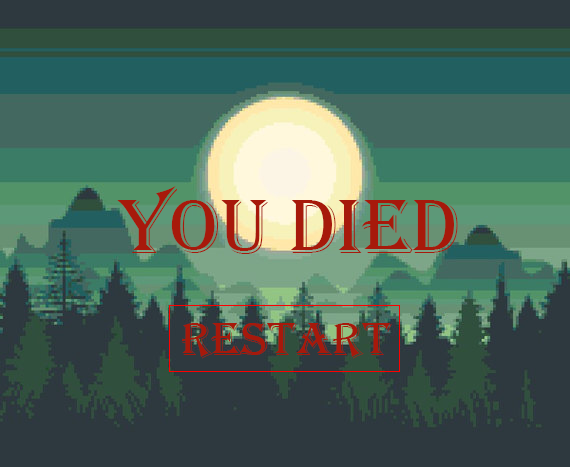
<style>
.page{position:relative;width:570px;height:467px;background:#2e393f}
.page>*{position:absolute;margin:0}
.t1{font:80px "Algerian";color:#a7190b}
.t2{font:48px "Algerian";color:#a7190b}
</style>
<div class="page">
<p class="t1" style="left:117px;top:186px;width:341px;height:68px">You Died</p>
<p class="t2" style="left:181px;top:323px;width:211px;height:36px">Restart</p>
</div>
